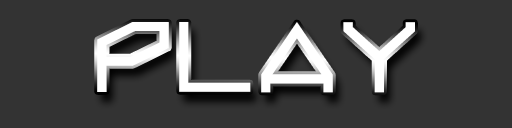
<style>
.page{position:relative;width:512px;height:128px;background:#333333}
.page>*{position:absolute;margin:0}
.t1{font:100px "KinineAlpha";color:#ffffff}
</style>
<div class="page">
<p class="t1" style="left:97px;top:22px;width:318px;height:71px">Play</p>
</div>
